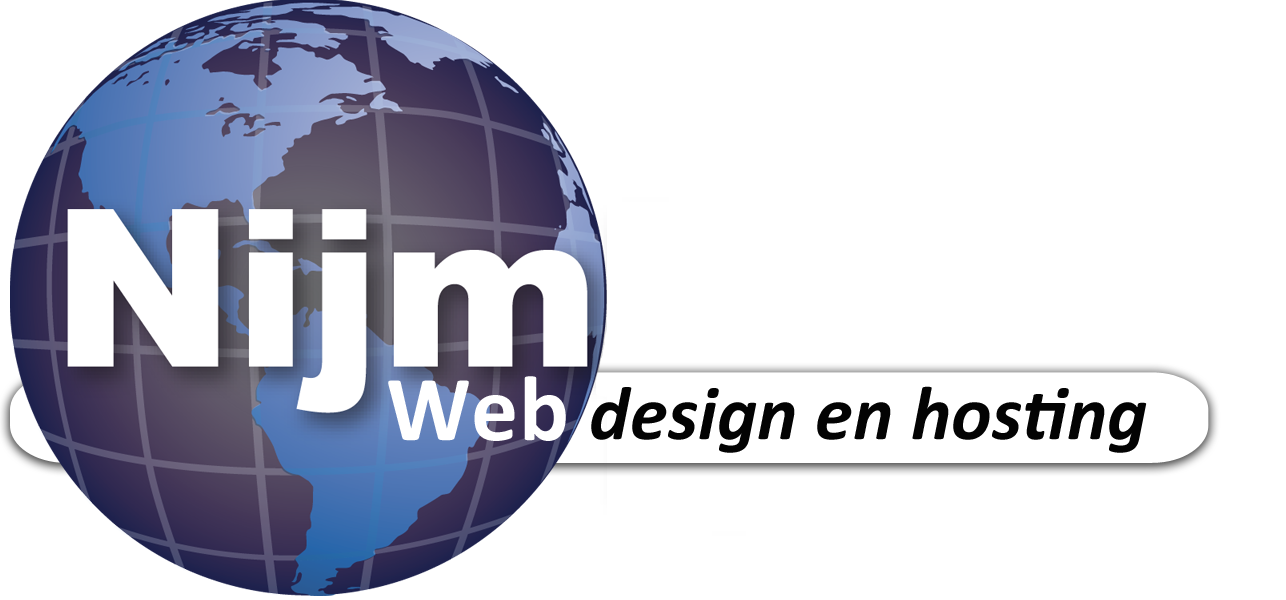
<style>
.page{position:relative;width:1286px;height:600px;background:#ffffff}
.page>*{position:absolute;margin:0}
.t1{font:93.8px "Calibri-Bold";color:#ffffff}
.t2{font:76.8px "Calibri-BoldItalic";color:#030303}
</style>
<div class="page">
<p class="t1" style="left:388px;top:376px;width:178px;height:65px">Web</p>
<p class="t2" style="left:591px;top:386px;width:556px;height:67px">design en hosting</p>
</div>
